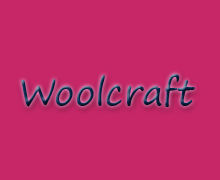
<style>
.page{position:relative;width:220px;height:180px;background:#c72767}
.page>*{position:absolute;margin:0}
.t1{font:36px "SegoePrint"}
</style>
<div class="page">
<p class="t1" style="left:21px;top:74px;width:174px;height:33px">Woolcraft</p>
</div>
